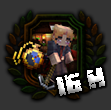
<style>
.page{position:relative;width:111px;height:110px;background:#333333}
.page>*{position:absolute;margin:0}
.t1{font:27px "MinecraftEvenings"}
</style>
<div class="page">
<p class="t1" style="left:56px;top:67px;width:49px;height:29px;rotate:-13deg">16 H</p>
</div>
